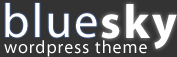
<style>
.page{position:relative;width:177px;height:57px;background:#333333}
.page>*{position:absolute;margin:0}
.t1{font:48px "MyriadPro-Regular";letter-spacing:0.05em;color:#ffffff}
.t2{font:48px "MyriadPro-Bold";letter-spacing:0.05em;color:#ffffff}
.t3{font:18px "MyriadPro-Regular";letter-spacing:0.05em;color:#ffffff}
</style>
<div class="page">
<p class="t1" style="left:5px;top:3px;width:92px;height:35px">blue</p>
<p class="t2" style="left:101px;top:4px;width:76px;height:45px">sky</p>
<p class="t3" style="left:4px;top:40px;width:143px;height:17px">wordpress theme</p>
</div>
